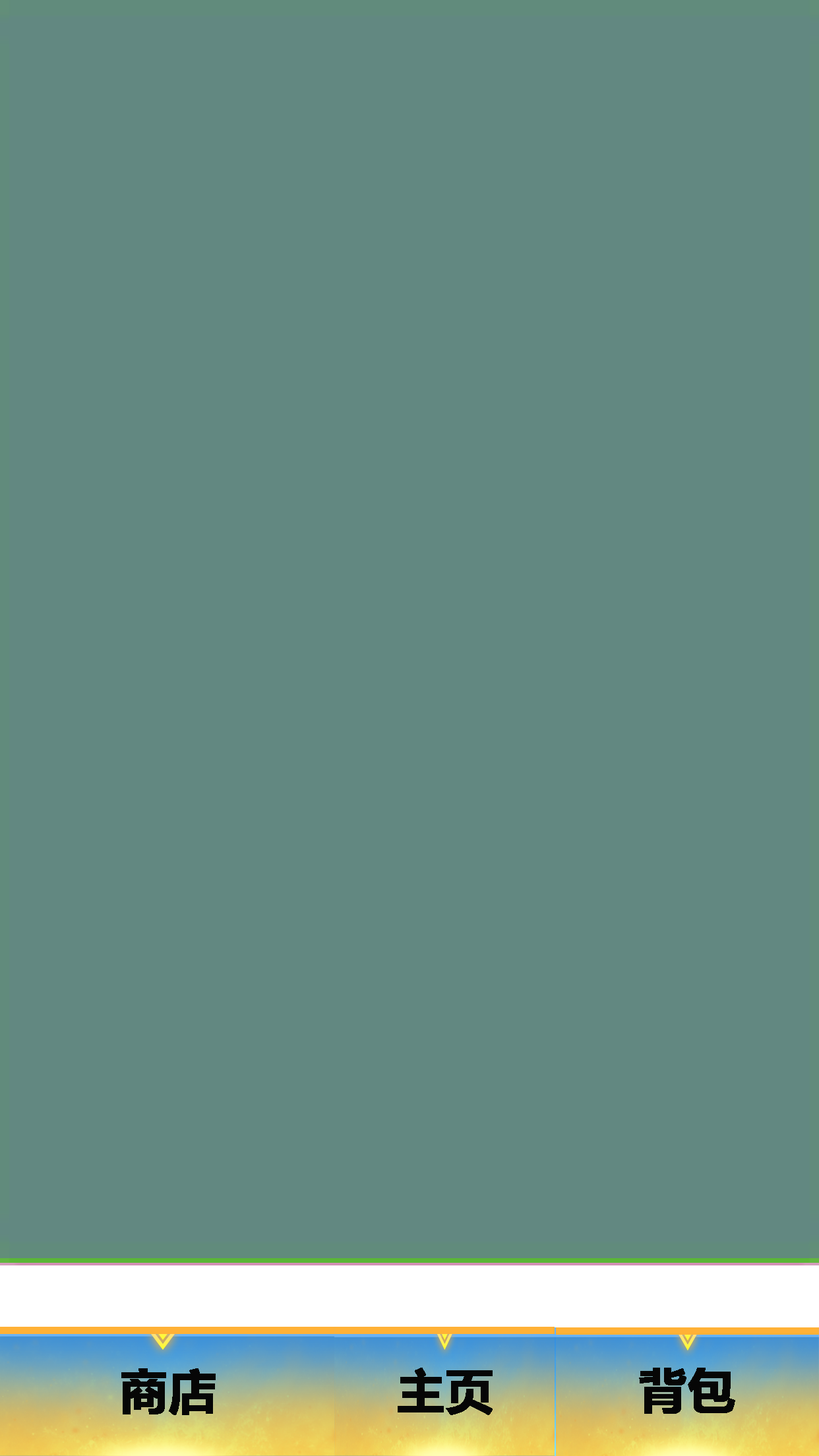
<style>
.page{position:relative;width:819px;height:1456px;background:#628881}
.page>*{position:absolute;margin:0}
.t1{font:47.5px "MicrosoftYaHei-Bold";letter-spacing:0.005em;color:#060606;font-weight:bold}
</style>
<div class="page">
<p class="t1" style="left:121px;top:1368px;width:95px;height:47px">商店</p>
<p class="t1" style="left:398px;top:1368px;width:95px;height:47px">主页</p>
<p class="t1" style="left:639px;top:1368px;width:96px;height:46px">背包</p>
</div>
